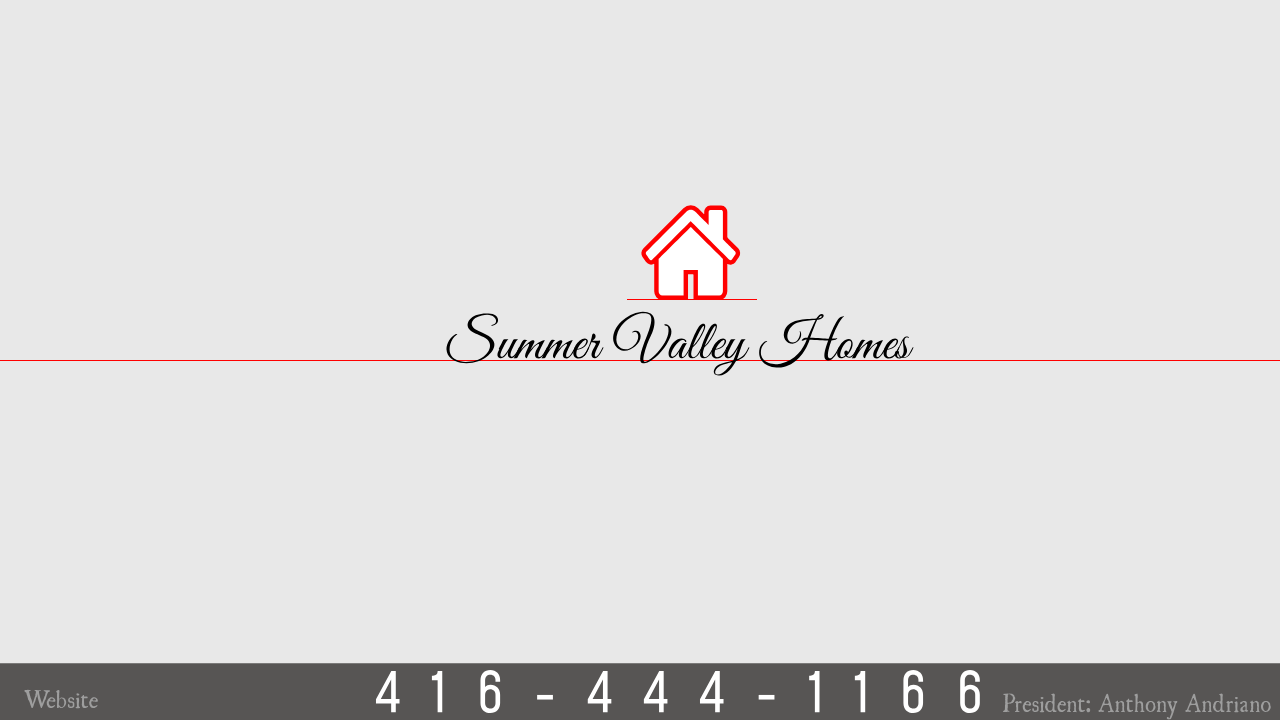
<style>
.page{position:relative;width:1280px;height:720px;background:#e8e8e8}
.page>*{position:absolute;margin:0}
.t1{font:55px "GreatVibes-Regular";color:#000000}
.t2{font:55px "Mohave-Regular";letter-spacing:0.542em;color:#ffffff}
.t3{font:22.5px "UglyQua";color:#9e9e9e}
.t4{font:23px "UglyQua";color:#9e9e9e;scale:0.95 1}
</style>
<div class="page">
<p class="t1" style="left:446px;top:308px;width:468px;height:68px">Summer Valley Homes</p>
<p class="t2" style="left:375px;top:670px;width:605px;height:44px">416-444-1166</p>
<p class="t3" style="left:24px;top:689px;width:74px;height:20px">Website</p>
<p class="t4" style="left:1002px;top:693px;width:269px;height:27px">President: Anthony Andriano</p>
</div>
